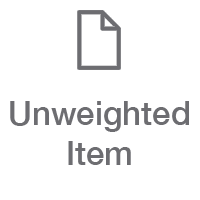
<style>
.page{position:relative;width:200px;height:200px;background:#ffffff}
.page>*{position:absolute;margin:0}
.t1{font:33px "HelveticaNeue-Medium";color:#6d6d71}
</style>
<div class="page">
<p class="t1" style="left:10px;top:101px;width:179px;height:64px;text-align:center">Unweighted<br>Item</p>
</div>
